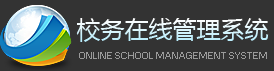
<style>
.page{position:relative;width:274px;height:71px;background:#333333}
.page>*{position:absolute;margin:0}
.t1{font:24px "MicrosoftYaHei"}
.t2{font:9px "Small Fonts";color:#9a9a9a}
</style>
<div class="page">
<p class="t1" style="left:76px;top:18px;width:193px;height:24px">校务在线管理系统</p>
<p class="t2" style="left:79px;top:52px;width:188px;height:7px">ONLINE SCHOOL MANAGEMENT SYSTEM</p>
</div>
